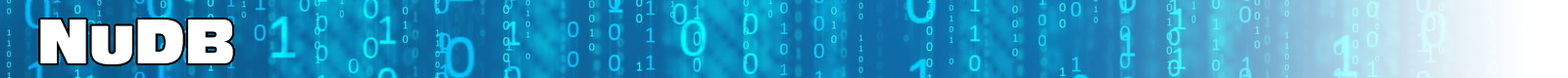
<style>
.page{position:relative;width:1568px;height:78px}
.page>*{position:absolute;margin:0}
.t1{font:58.8px "AntiqueOliveCompact-Regular";color:#ffffff}
</style>
<div class="page">
<p class="t1" style="left:40px;top:20px;width:193px;height:45px">NuDB</p>
</div>
